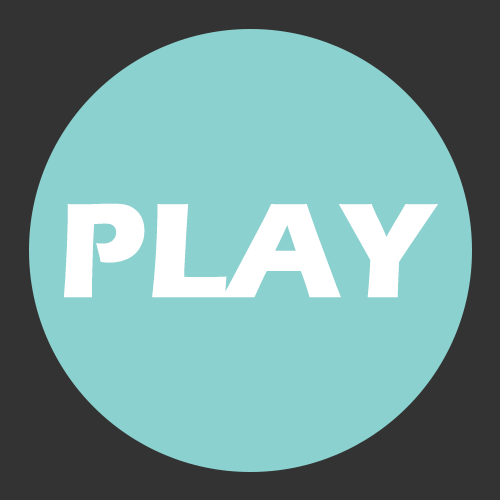
<style>
.page{position:relative;width:500px;height:500px;background:#8bd1d0}
.page>*{position:absolute;margin:0}
.t1{font:139.5px "ErasITC-Bold";color:#ffffff}
</style>
<div class="page">
<p class="t1" style="left:64px;top:203px;width:374px;height:95px">PLAY</p>
</div>
